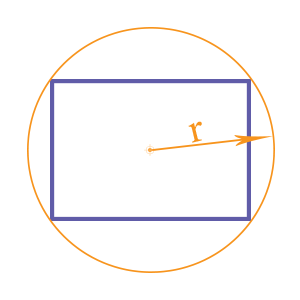
<style>
.page{position:relative;width:300px;height:300px;background:#ffffff}
.page>*{position:absolute;margin:0}
.t1{font:41.9px "MinionPro-Regular";color:#f7941d}
</style>
<div class="page">
<p class="t1" style="left:188px;top:121px;width:14px;height:22px;rotate:-14deg">r</p>
</div>
